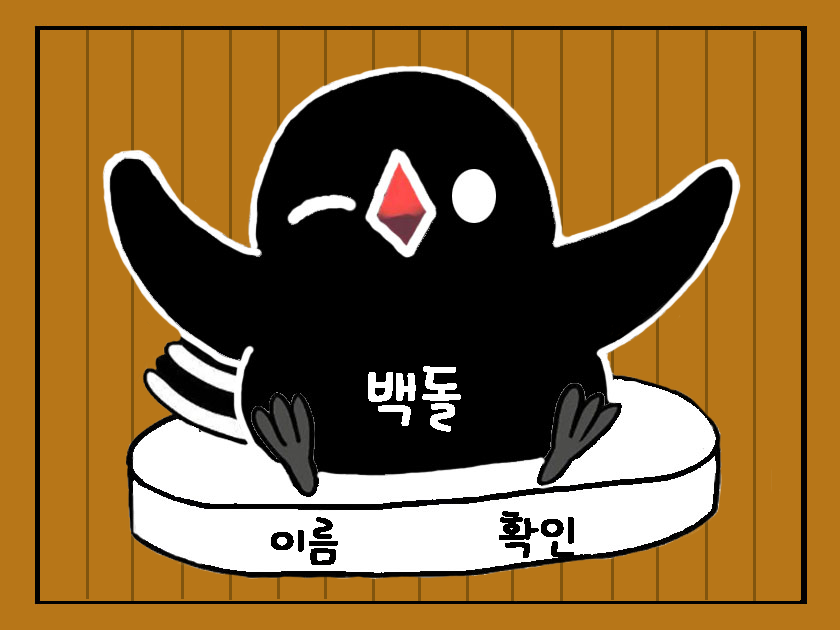
<style>
.page{position:relative;width:840px;height:630px;background:#b77618}
.page>*{position:absolute;margin:0}
.t1{font:66.7px "OTSoolaejabkiR";color:#ffffff;font-weight:bold}
.t2{font:50px "OTSoolaejabkiR";color:#000000;font-weight:bold}
.t3{font:12px "OTSoolaejabkiR";color:#000000;font-weight:bold}
</style>
<div class="page">
<p class="t1" style="left:368px;top:366px;width:93px;height:66px">백돌</p>
<p class="t2" style="left:271px;top:517px;width:67px;height:48px">이름</p>
<p class="t3" style="left:499px;top:511px;width:75px;height:47px;text-align:center">확인</p>
</div>
